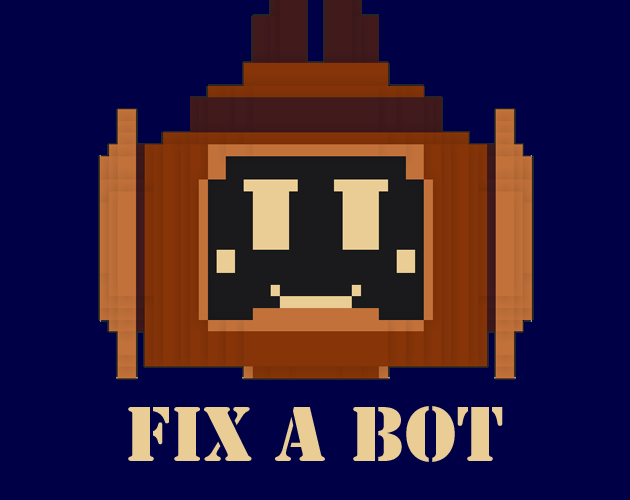
<style>
.page{position:relative;width:630px;height:500px;background:#000046}
.page>*{position:absolute;margin:0}
.t1{font:72px "StencilStd";color:#eacd94}
</style>
<div class="page">
<p class="t1" style="left:128px;top:406px;width:375px;height:56px">Fix A BoT</p>
</div>
